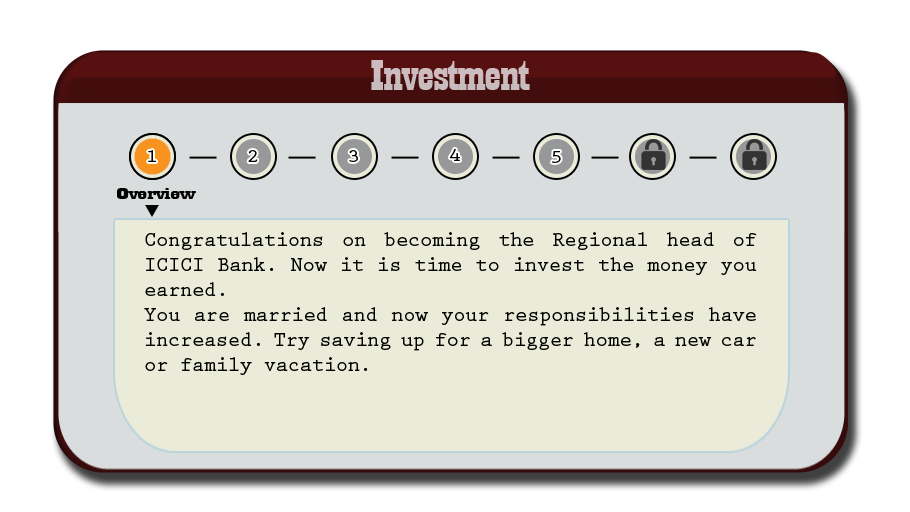
<style>
.page{position:relative;width:910px;height:512px;background:#eaebd8}
.page>*{position:absolute;margin:0}
.t1{font:44.6px "Playbill";letter-spacing:-0.025em;color:#c8bbbe;scale:1.61 1}
.t2{font:18.8px "PrestigeEliteStd-Bd";letter-spacing:-0.025em;color:#020201;scale:1.18 1}
.t3{font:17.3px "Playbill";letter-spacing:-0.025em;color:#020201;scale:2.47 1}
.t4{font:20.8px "PrestigeEliteStd-Bd";letter-spacing:-0.025em;color:#020201}
</style>
<div class="page">
<p class="t1" style="left:371px;top:60px;width:159px;height:30px">Investment</p>
<p class="t2" style="left:148px;top:150px;width:8px;height:12px">1</p>
<p class="t2" style="left:248px;top:150px;width:10px;height:12px">2</p>
<p class="t2" style="left:349px;top:150px;width:9px;height:12px">3</p>
<p class="t2" style="left:449px;top:148px;width:11px;height:13px">4</p>
<p class="t2" style="left:551px;top:151px;width:10px;height:12px">5</p>
<p class="t3" style="left:117px;top:188px;width:79px;height:11px">Overview</p>
<p class="t4" style="left:144px;top:232px;width:613px;height:143px;text-align:justify">Congratulations on becoming the Regional head of ICICI Bank. Now it is time to invest the money you earned. <br>You are married and now your responsibilities have increased. Try saving up for a bigger home, a new car or family vacation.</p>
</div>
